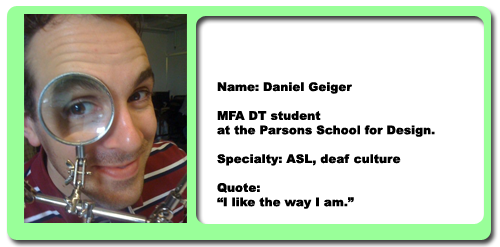
<style>
.page{position:relative;width:500px;height:247px;background:#ffffff}
.page>*{position:absolute;margin:0}
.t1{font:12px "Arial-Black";color:#000000}
</style>
<div class="page">
<p class="t1" style="left:217px;top:82px;width:218px;height:127px">Name: Daniel Geiger<br><br>MFA DT student<br>at the Parsons School for Design.<br><br>Specialty: ASL, deaf culture<br><br>Quote: <br>“I like the way I am.”</p>
</div>
